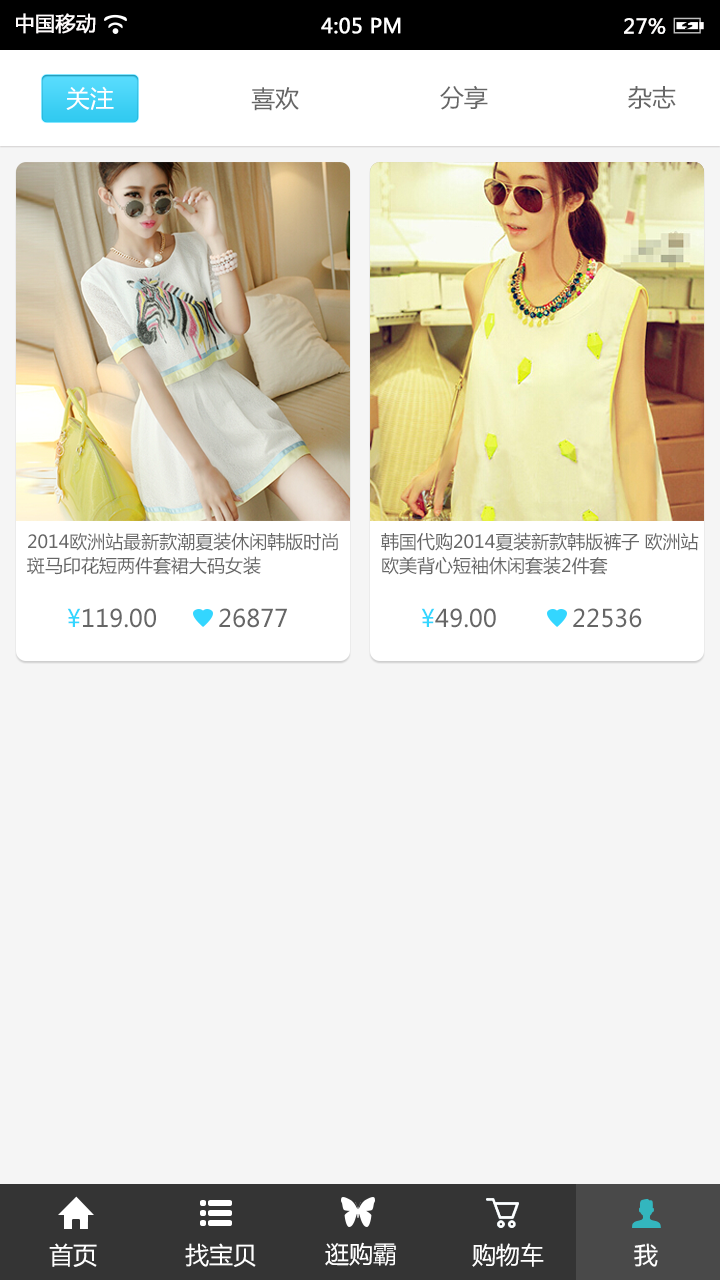
<style>
.page{position:relative;width:720px;height:1280px;background:#f5f5f5}
.page>*{position:absolute;margin:0}
.t1{font:20px "MicrosoftYaHei";color:#fffcfc;font-weight:bold}
.t2{font:20px "MicrosoftYaHei";color:#ffffff;font-weight:bold}
.t3{font:20px "MicrosoftYaHei";color:#fffefe;font-weight:bold}
.t4{font:24px "MicrosoftYaHei";color:#ffffff}
.t5{font:24px "MicrosoftYaHei";color:#666666}
.t6{font:18px/24px "MicrosoftYaHei";color:#666666}
.t7{font:24px "MicrosoftYaHei";color:#33d6ff}
</style>
<div class="page">
<p class="t1" style="left:16px;top:13px;width:80px;height:21px">中国移动</p>
<p class="t2" style="left:321px;top:17px;width:80px;height:17px">4:05 PM</p>
<p class="t3" style="left:624px;top:18px;width:42px;height:16px">27%</p>
<p class="t4" style="left:66px;top:86px;width:48px;height:24px">关注</p>
<p class="t5" style="left:251px;top:87px;width:48px;height:24px">喜欢</p>
<p class="t5" style="left:440px;top:85px;width:48px;height:25px">分享</p>
<p class="t5" style="left:628px;top:86px;width:48px;height:23px">杂志</p>
<p class="t6" style="left:27px;top:532px;width:311px;height:43px">2014欧洲站最新款潮夏装休闲韩版时尚<br>斑马印花短两件套裙大码女装</p>
<p class="t6" style="left:381px;top:532px;width:318px;height:43px">韩国代购2014夏装新款韩版裤子 欧洲站<br>欧美背心短袖休闲套装2件套</p>
<p class="t5" style="left:67px;top:608px;width:89px;height:20px"><span class="t7">¥</span>119.00</p>
<p class="t5" style="left:219px;top:608px;width:68px;height:20px">26877</p>
<p class="t5" style="left:421px;top:608px;width:75px;height:20px"><span class="t7">¥</span>49.00</p>
<p class="t5" style="left:573px;top:608px;width:69px;height:20px">22536</p>
<p class="t4" style="left:49px;top:1243px;width:48px;height:24px">首页</p>
<p class="t4" style="left:185px;top:1243px;width:71px;height:24px">找宝贝</p>
<p class="t4" style="left:325px;top:1242px;width:71px;height:24px">逛购霸</p>
<p class="t4" style="left:472px;top:1243px;width:72px;height:24px">购物车</p>
<p class="t4" style="left:634px;top:1243px;width:24px;height:24px">我</p>
</div>
